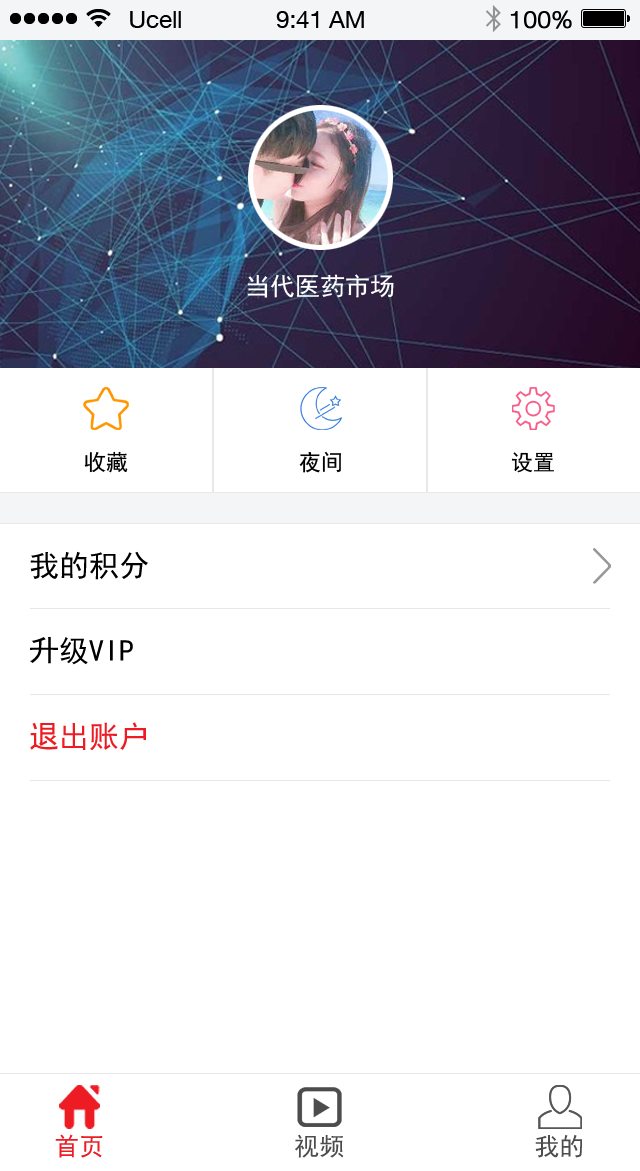
<style>
.page{position:relative;width:640px;height:1171px;background:#ffffff}
.page>*{position:absolute;margin:0}
.t1{font:25px "SimHei";color:#ffffff}
.t2{font:22px "SimHei";color:#000000}
.t3{font:30px "SimHei";color:#000000}
.t4{font:30px "SimHei";color:#ed1b23}
.t5{font:25px "SimHei";color:#ed1b23}
.t6{font:25px "SimHei";color:#4c4c4c}
</style>
<div class="page">
<p class="t1" style="left:247px;top:274px;width:147px;height:24px">当代医药市场</p>
<p class="t2" style="left:84px;top:451px;width:44px;height:22px">收藏</p>
<p class="t2" style="left:299px;top:451px;width:42px;height:22px">夜间</p>
<p class="t2" style="left:511px;top:452px;width:43px;height:21px">设置</p>
<p class="t3" style="left:30px;top:551px;width:118px;height:29px">我的积分</p>
<p class="t3" style="left:30px;top:637px;width:103px;height:28px">升级VIP</p>
<p class="t4" style="left:30px;top:722px;width:116px;height:29px">退出账户</p>
<p class="t5" style="left:55px;top:1134px;width:48px;height:24px">首页</p>
<p class="t6" style="left:295px;top:1134px;width:49px;height:24px">视频</p>
<p class="t6" style="left:535px;top:1135px;width:47px;height:23px">我的</p>
</div>
